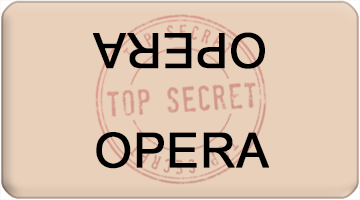
<style>
.page{position:relative;width:360px;height:200px;background:#e8d0bb}
.page>*{position:absolute;margin:0}
.t1{font:48px "ArialMT";color:#000000;font-weight:bold}
</style>
<div class="page">
<p class="t1" style="left:93px;top:32px;width:172px;height:37px;rotate:180deg">OPERA</p>
<p class="t1" style="left:96px;top:132px;width:173px;height:37px">OPERA</p>
</div>
